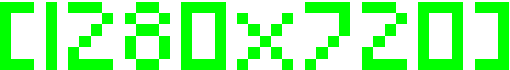
<style>
.page{position:relative;width:510px;height:70px;background:#ffffff}
.page>*{position:absolute;margin:0}
.t1{font:57px "Pixeled";color:#00ff00}
</style>
<div class="page">
<p class="t1" style="left:0px;top:2px;width:509px;height:68px">[1280x720]</p>
</div>
